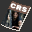
<style>
.page{position:relative;width:32px;height:32px;background:#333333}
.page>*{position:absolute;margin:0}
.t1{font:6.9px "RubikMonoOne-Regular";color:#ffffff}
</style>
<div class="page">
<p class="t1" style="left:10px;top:2px;width:18px;height:11px;rotate:18deg">CRS</p>
</div>
